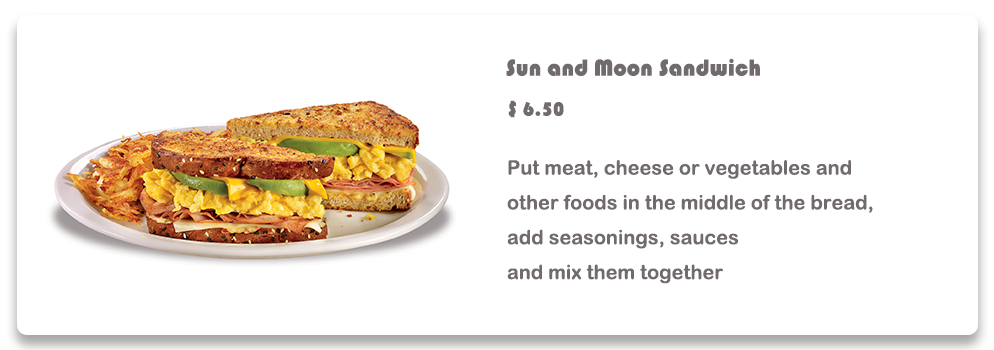
<style>
.page{position:relative;width:994px;height:350px;background:#ffffff}
.page>*{position:absolute;margin:0}
.t1{font:23.9px "STHupo";color:#716b6b}
.t2{font:19.9px "STHupo";color:#716b6b}
.t3{font:19.9px "ArialRoundedMTBold";color:#716b6b}
</style>
<div class="page">
<p class="t1" style="left:506px;top:58px;width:254px;height:18px">Sun and Moon Sandwich</p>
<p class="t2" style="left:508px;top:100px;width:56px;height:18px">$ 6.50</p>
<p class="t3" style="left:507px;top:160px;width:366px;height:124px">Put meat, cheese or vegetables and <br>other foods in the middle of the bread, <br>add seasonings, sauces <br>and mix them together</p>
</div>
